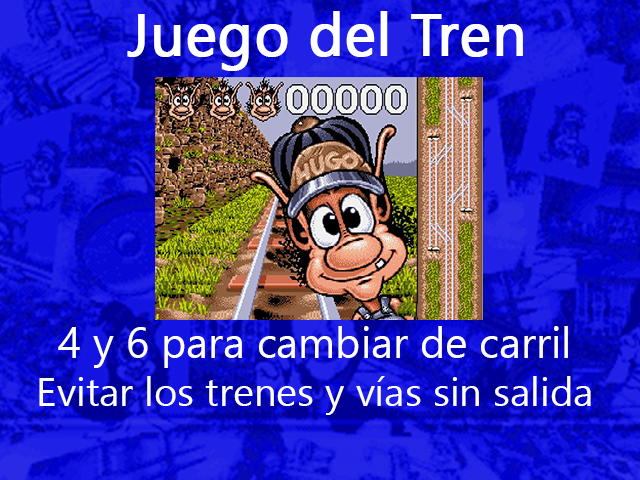
<style>
.page{position:relative;width:640px;height:480px}
.page>*{position:absolute;margin:0}
.t1{font:59px "SegoeUI";color:#ffffff;font-weight:bold}
.t2{font:40px "SegoeUI";color:#ffffff}
.t3{font:43px "SegoeUI";color:#ffffff}
</style>
<div class="page">
<p class="t1" style="left:127px;top:11px;width:396px;height:60px">Juego del Tren</p>
<p class="t2" style="left:39px;top:326px;width:552px;height:89px;text-align:center"><span class="t3">4 y 6 para cambiar de carril<br></span>Evitar los trenes y vías sin salida</p>
</div>
